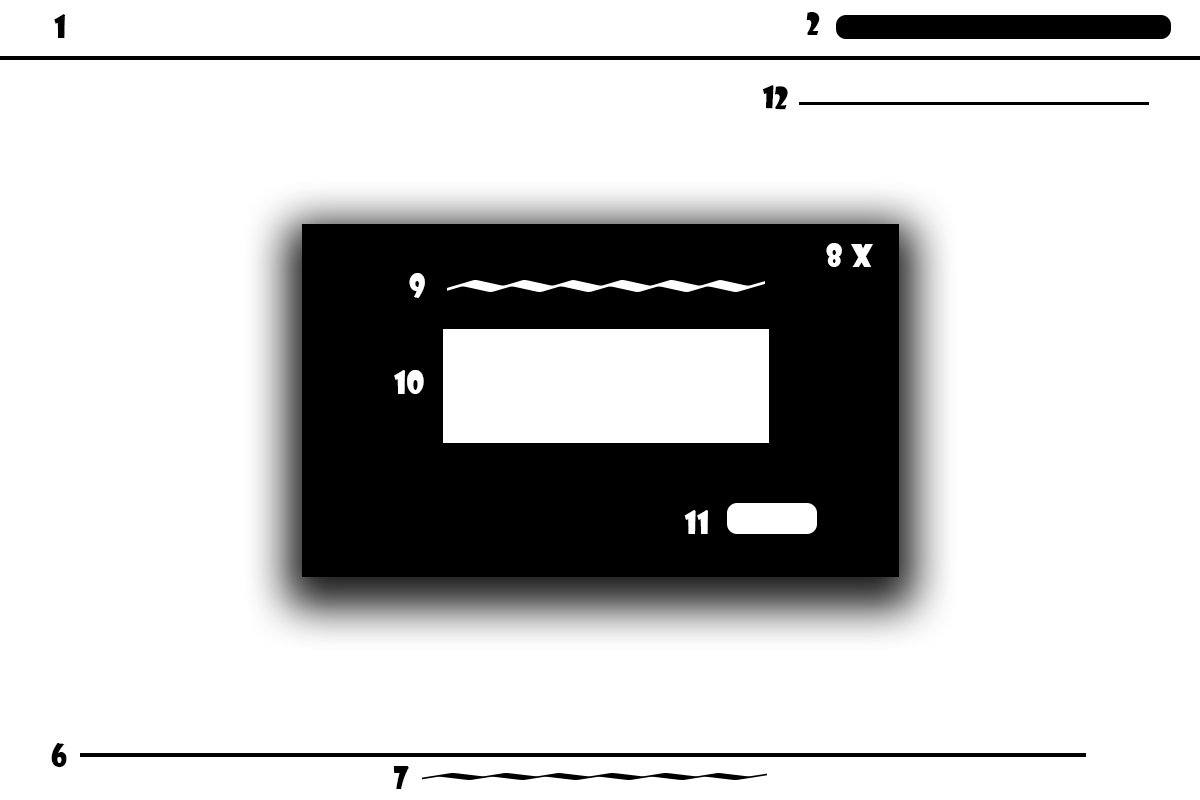
<style>
.page{position:relative;width:1200px;height:800px;background:#ffffff}
.page>*{position:absolute;margin:0}
.t1{font:30px "ShowcardGothic-Reg";color:#000000}
.t2{font:30px "ShowcardGothic-Reg";color:#ffffff}
.t3{font:30px "ShowcardGothic-Reg";color:#fffefe}
</style>
<div class="page">
<p class="t1" style="left:54px;top:14px;width:11px;height:24px">1</p>
<p class="t1" style="left:806px;top:12px;width:14px;height:23px">2</p>
<p class="t1" style="left:762px;top:85px;width:26px;height:25px;rotate:2deg">12</p>
<p class="t2" style="left:826px;top:243px;width:16px;height:24px">8</p>
<p class="t3" style="left:851px;top:244px;width:22px;height:23px">x</p>
<p class="t2" style="left:409px;top:273px;width:16px;height:25px">9</p>
<p class="t2" style="left:394px;top:370px;width:30px;height:24px">10</p>
<p class="t2" style="left:684px;top:510px;width:24px;height:24px">11</p>
<p class="t1" style="left:51px;top:743px;width:16px;height:24px">6</p>
<p class="t1" style="left:393px;top:766px;width:16px;height:24px">7</p>
</div>
